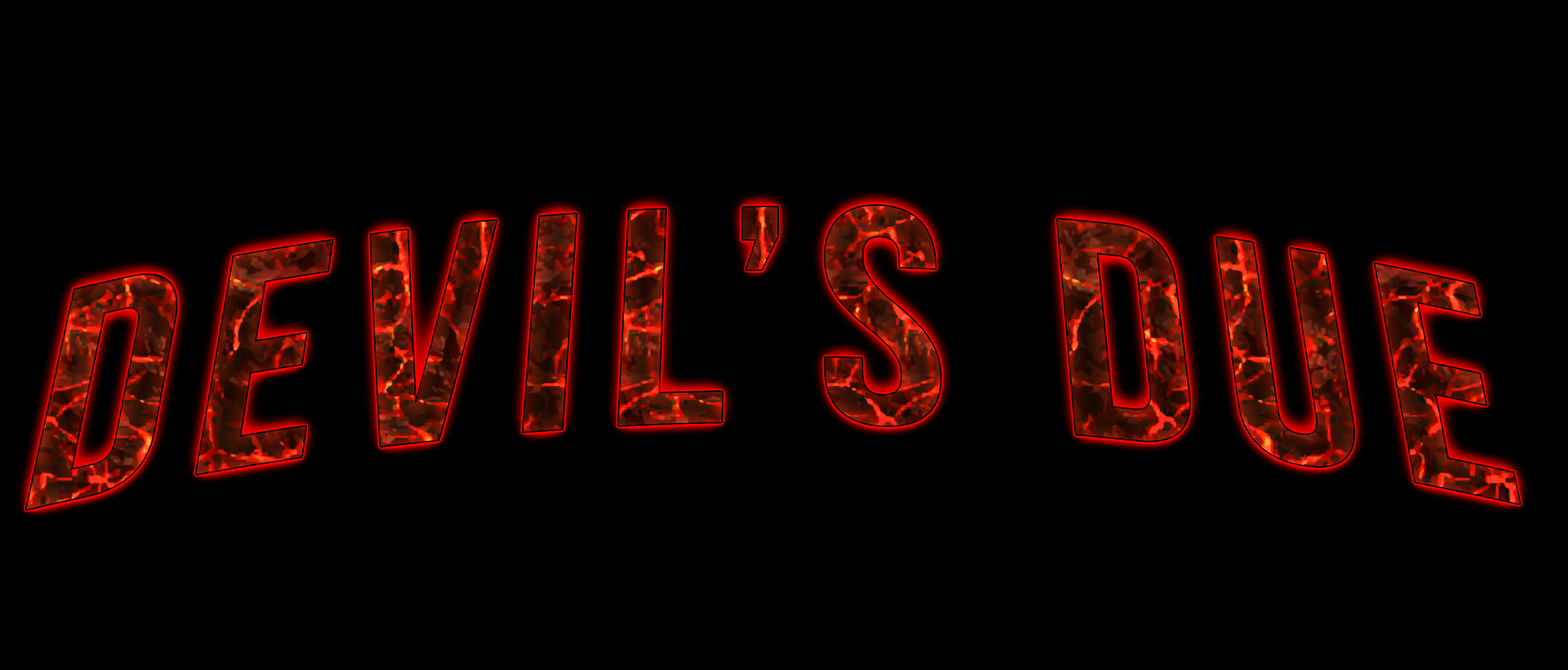
<style>
.page{position:relative;width:1568px;height:670px;background:#000000}
.page>*{position:absolute;margin:0}
.t1{font:324.7px "BebasNeue";letter-spacing:0.08em;text-transform:uppercase}
</style>
<div class="page">
<p class="t1" style="left:26px;top:206px;width:1494px;height:304px">Devil’s Due</p>
</div>
